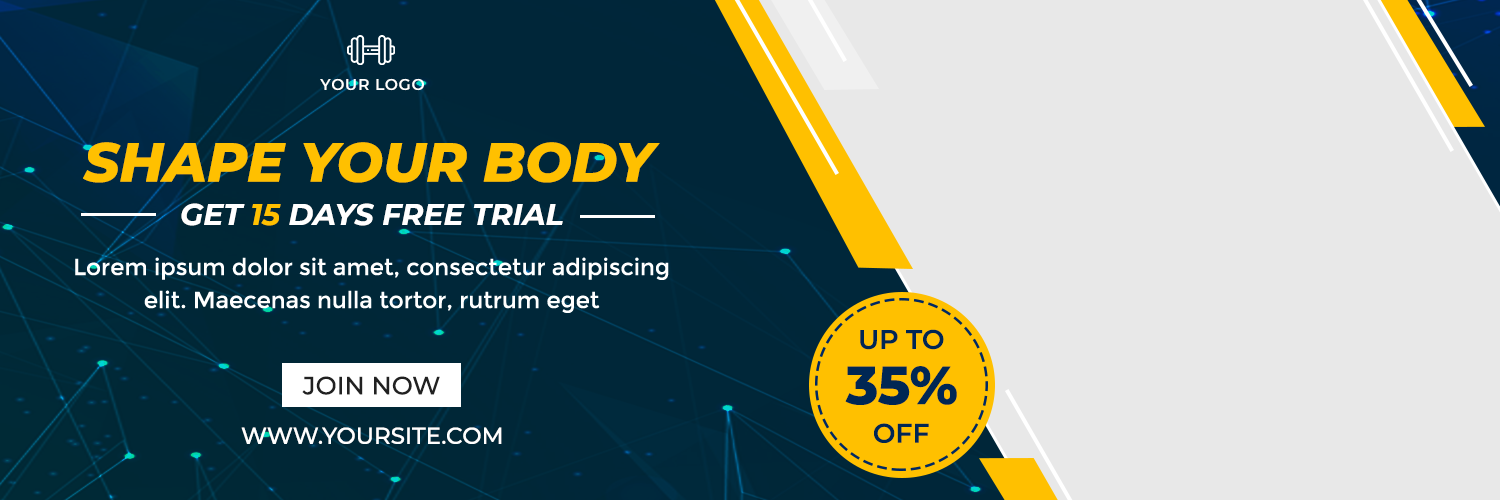
<style>
.page{position:relative;width:1500px;height:500px;background:#e8e8e8}
.page>*{position:absolute;margin:0}
.t1{font:15.5px "Montserrat-SemiBold";letter-spacing:0.05em;color:#ffffff}
.t2{font:55px "Montserrat-ExtraBoldItalic";color:#ffc000}
.t3{font:30px "Montserrat-BoldItalic";color:#ffffff}
.t4{font:30px "Montserrat-BoldItalic";color:#ffc000}
.t5{font:23px/33px "Montserrat-Regular";color:#ffffff}
.t6{font:26.8px "Montserrat-SemiBold";color:#002754}
.t7{font:53.7px "Montserrat-ExtraBold";color:#002754}
.t8{font:25px "Montserrat-Medium";color:#212121}
.t9{font:23px "Montserrat-Medium";color:#ffffff}
</style>
<div class="page">
<p class="t1" style="left:320px;top:78px;width:104px;height:13px">YOUR LOGO</p>
<p class="t2" style="left:83px;top:142px;width:577px;height:41px">SHAPE YOUR BODY</p>
<p class="t3" style="left:181px;top:203px;width:382px;height:23px">GET <span class="t4">15</span> DAYS FREE TRIAL</p>
<p class="t5" style="left:75px;top:257px;width:594px;height:56px;text-align:center">Lorem ipsum dolor sit amet, consectetur adipiscing elit. Maecenas nulla tortor, rutrum eget</p>
<p class="t6" style="left:860px;top:329px;width:84px;height:21px">UP TO</p>
<p class="t7" style="left:845px;top:366px;width:112px;height:39px">35%</p>
<p class="t8" style="left:302px;top:376px;width:138px;height:19px">JOIN NOW</p>
<p class="t6" style="left:874px;top:423px;width:55px;height:20px">OFF</p>
<p class="t9" style="left:241px;top:427px;width:261px;height:17px">WWW.YOURSITE.COM</p>
</div>
